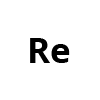
<style>
.page{position:relative;width:100px;height:100px;background:#ffffff}
.page>*{position:absolute;margin:0}
.t1{font:35px "OpenSans-Bold";color:#000000}
</style>
<div class="page">
<p class="t1" style="left:30px;top:38px;width:40px;height:25px">Re</p>
</div>
